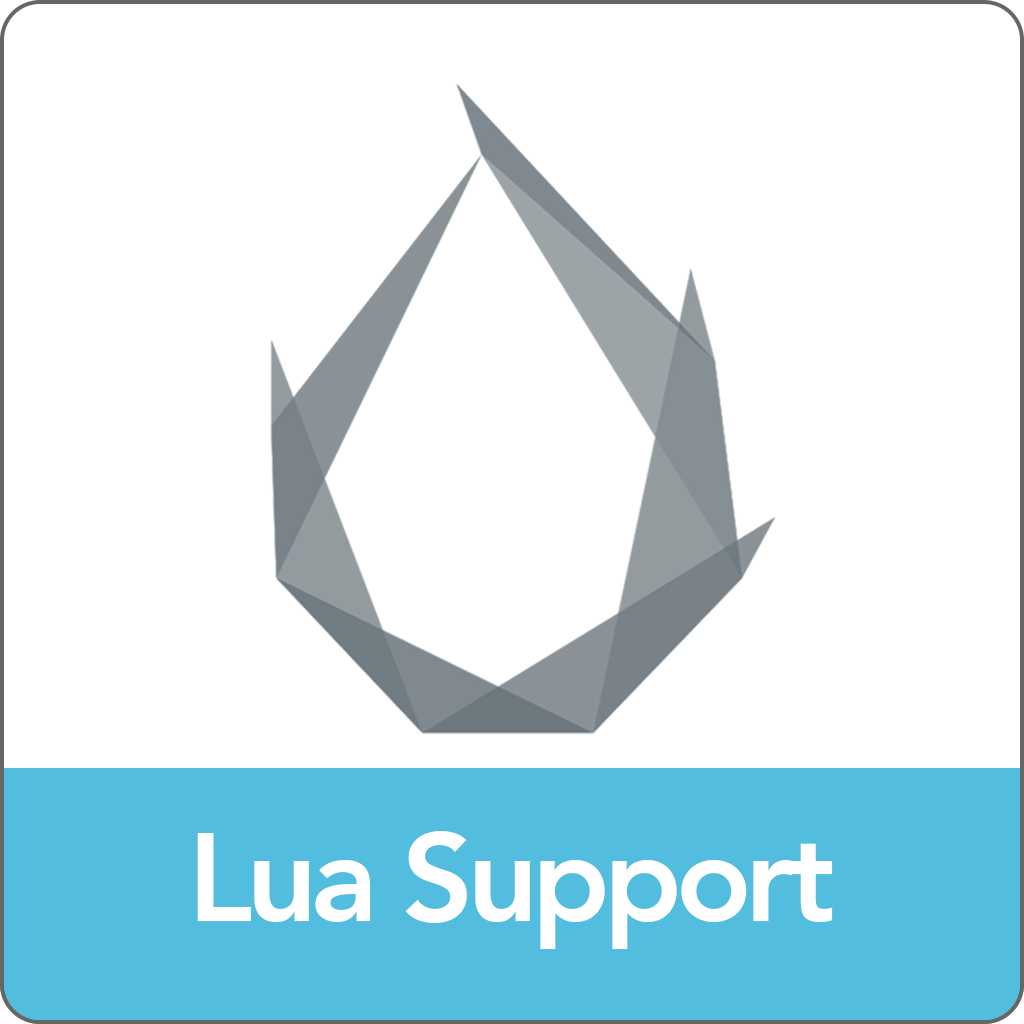
<style>
.page{position:relative;width:1024px;height:1024px;background:#ffffff}
.page>*{position:absolute;margin:0}
.t1{font:124px "Avenir-Heavy";letter-spacing:-0.05em;color:#ffffff}
</style>
<div class="page">
<p class="t1" style="left:197px;top:831px;width:636px;height:118px">Lua Support</p>
</div>
